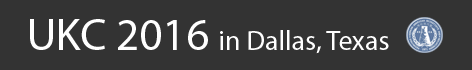
<style>
.page{position:relative;width:472px;height:70px;background:#333333}
.page>*{position:absolute;margin:0}
.t1{font:27.6px "MyriadPro-Regular";color:#ffffff}
.t2{font:45px "MyriadPro-Regular";color:#ffffff}
</style>
<div class="page">
<p class="t1" style="left:30px;top:19px;width:359px;height:35px"><span class="t2">UKC 2016 </span>in Dallas, Texas</p>
</div>
